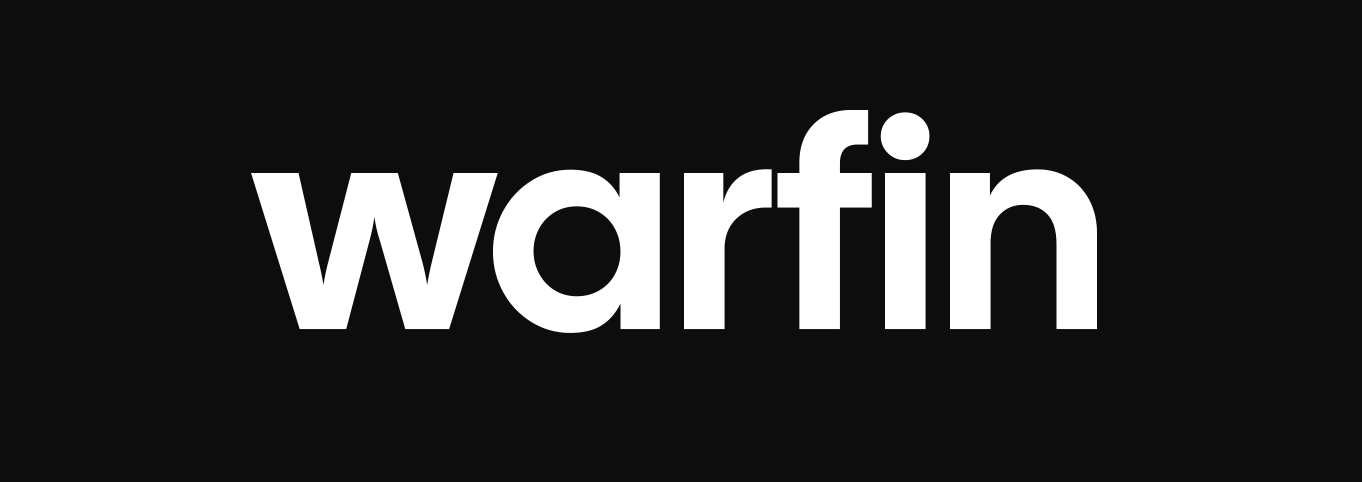
<style>
.page{position:relative;width:1362px;height:482px;background:#0d0d0d}
.page>*{position:absolute;margin:0}
.t1{font:300px "CalSans-SemiBold";color:#ffffff}
</style>
<div class="page">
<p class="t1" style="left:251px;top:110px;width:846px;height:223px">warfin</p>
</div>
